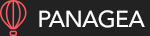
<style>
.page{position:relative;width:150px;height:36px;background:#222222}
.page>*{position:absolute;margin:0}
.t1{font:23px "Avenir-Medium";letter-spacing:-0.025em;color:#ffffff;text-transform:uppercase}
</style>
<div class="page">
<p class="t1" style="left:39px;top:10px;width:106px;height:18px">PANAGEA</p>
</div>
